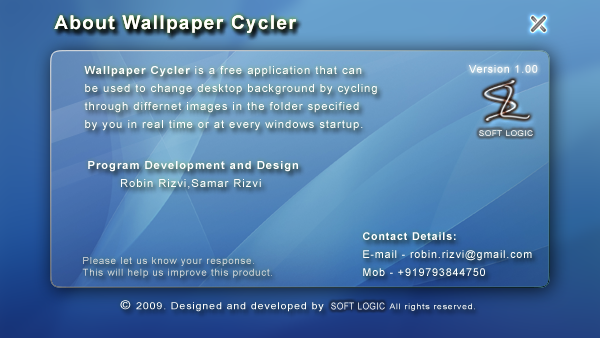
<style>
.page{position:relative;width:600px;height:338px}
.page>*{position:absolute;margin:0}
.t1{font:18.7px "Arial-BoldMT";letter-spacing:0.08em;color:#fefefe}
.t2{font:10.7px "ArialMT";letter-spacing:0.08em;color:#ffffff}
.t3{font:11.3px/18px "ArialMT";letter-spacing:0.08em;color:#fefefe}
.t4{font:11.3px/18px "Arial-BoldMT";letter-spacing:0.08em;color:#fefefe}
.t5{font:8px "ArialMT";letter-spacing:0.08em}
.t6{font:10.7px "ArialMT";letter-spacing:0.08em;color:#fefefe}
.t7{font:10.7px/18px "ArialMT";letter-spacing:0.08em;color:#fefefe}
.t8{font:10.7px/18px "Arial-BoldMT";letter-spacing:0.08em;color:#fefefe}
.t9{font:9.7px "ArialMT";letter-spacing:0.08em;color:#e1e1e1}
.t10{font:9.7px "ArialMT";letter-spacing:0.08em;color:#fefefe;scale:1.1 1}
.t11{font:12px "ArialMT";letter-spacing:0.08em;color:#fefefe;scale:1.1 1}
.t12{font:9.8px "ArialMT";letter-spacing:0.08em;scale:0.82 1}
.t13{font:8px "ArialMT";letter-spacing:0.08em;scale:1.1 1}
</style>
<div class="page">
<p class="t1" style="left:54px;top:15px;width:242px;height:18px">About Wallpaper Cycler</p>
<p class="t1" style="left:54px;top:15px;width:242px;height:18px">About Wallpaper Cycler</p>
<p class="t1" style="left:54px;top:15px;width:242px;height:18px">About Wallpaper Cycler</p>
<p class="t2" style="left:469px;top:65px;width:69px;height:8px">Version 1.00</p>
<p class="t3" style="left:84px;top:66px;width:293px;height:65px"><span class="t4">Wallpaper Cycler</span> is a free application that can<br>be used to change desktop background by cycling <br>through differnet images in the folder specified<br>by you in real time or at every windows startup.</p>
<p class="t5" style="left:479px;top:130px;width:54px;height:6px">SOFT LOGIC</p>
<p class="t4" style="left:88px;top:161px;width:210px;height:28px">Program Development and Design<br><span class="t3">        Robin Rizvi,Samar Rizvi</span></p>
<p class="t6" style="left:363px;top:232px;width:169px;height:44px"><span class="t7"><br></span><span class="t8">Contact Details:<br></span><span class="t7">E-mail - </span>robin.rizvi@gmail.com<br><span class="t7">Mob - +919793844750</span></p>
<p class="t9" style="left:82px;top:257px;width:190px;height:21px">Please let us know your response.<br>This will help us improve this product.</p>
<p class="t10" style="left:120px;top:300px;width:204px;height:12px"><span class="t11">© </span>2009. Designed and developed by</p>
<p class="t12" style="left:331px;top:302px;width:54px;height:8px">SOFT LOGIC</p>
<p class="t13" style="left:389px;top:303px;width:86px;height:8px">All rights reserved.</p>
</div>
